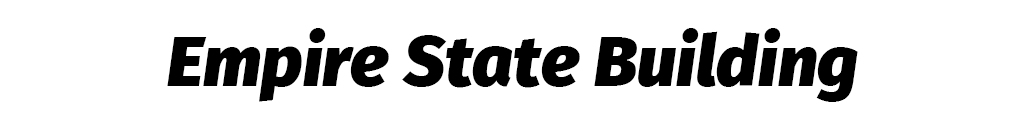
<style>
.page{position:relative;width:1024px;height:128px;background:#ffffff}
.page>*{position:absolute;margin:0}
.t1{font:71px "FiraSans-BlackItalic";color:#000000}
</style>
<div class="page">
<p class="t1" style="left:167px;top:28px;width:691px;height:74px">Empire State Building</p>
</div>
